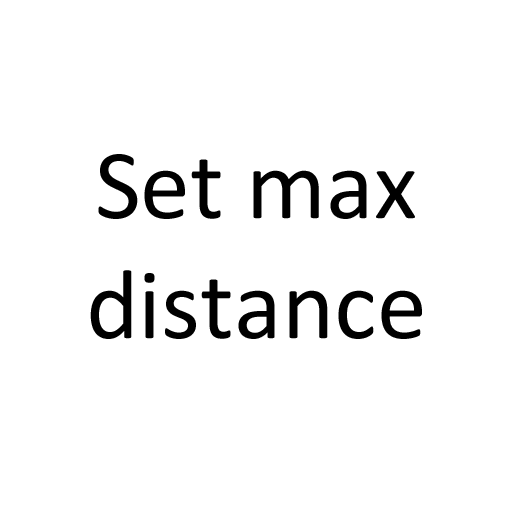
<style>
.page{position:relative;width:512px;height:512px;background:#ffffff}
.page>*{position:absolute;margin:0}
.t1{font:100px "Calibri";color:#000000}
</style>
<div class="page">
<p class="t1" style="left:90px;top:154px;width:332px;height:185px;text-align:center">Set max<br>distance</p>
</div>
